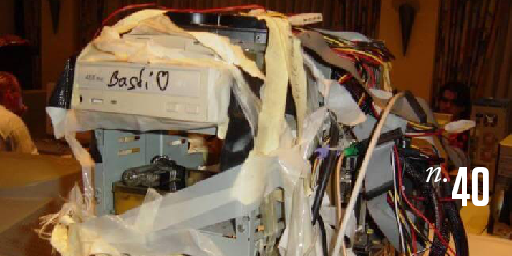
<style>
.page{position:relative;width:512px;height:256px}
.page>*{position:absolute;margin:0}
.t1{font:35px "ACaslonPro-Italic";color:#ffffff}
.t2{font:55px "Tungsten-Semibold";color:#ffffff}
</style>
<div class="page">
<p class="t1" style="left:426px;top:167px;width:63px;height:39px">n.<span class="t2">40</span></p>
</div>
